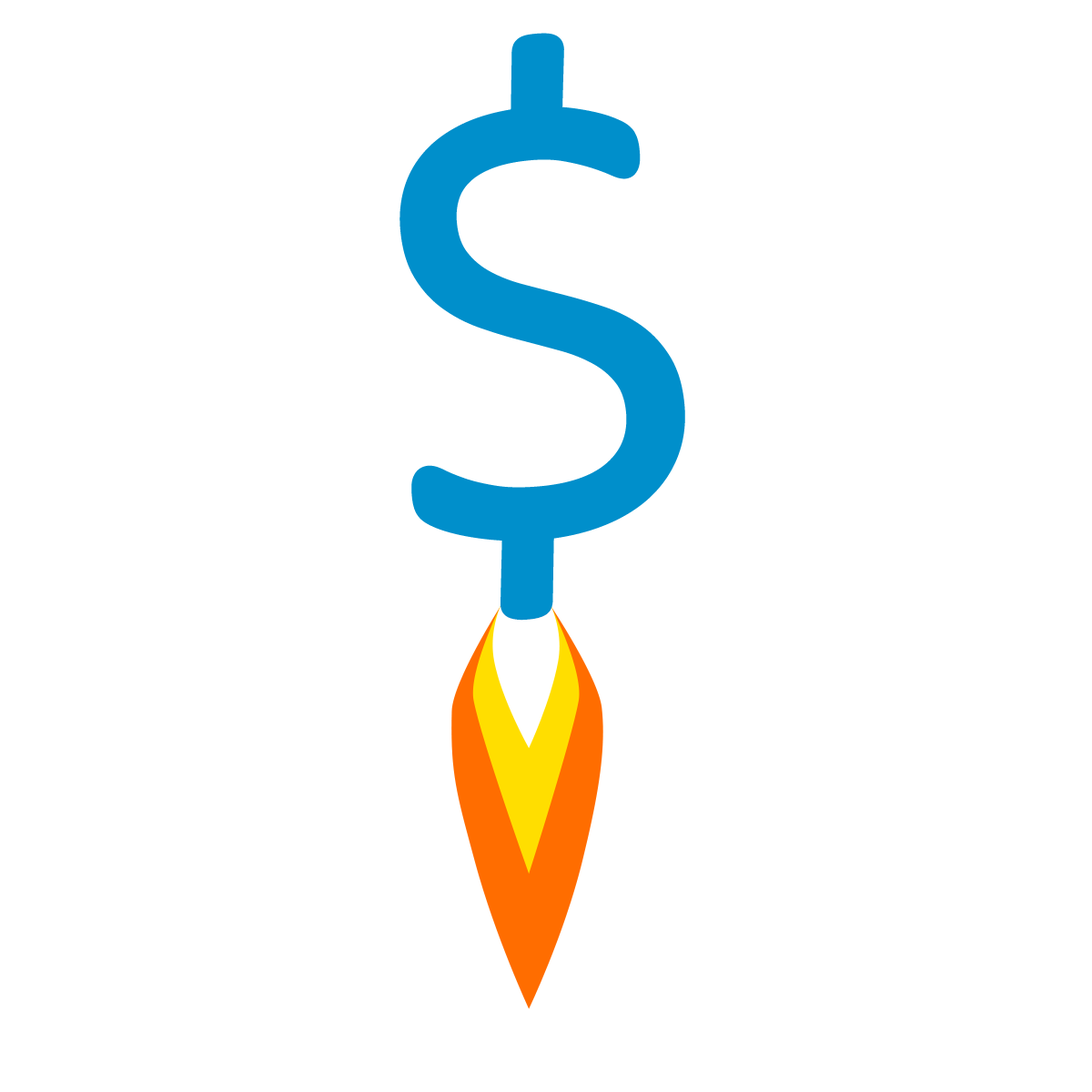
<style>
.page{position:relative;width:1092px;height:1092px;background:#ffffff}
.page>*{position:absolute;margin:0}
.t1{font:655.3px "Calibri-Light";letter-spacing:-0.01em;color:#008fcb;font-weight:bold}
</style>
<div class="page">
<p class="t1" style="left:399px;top:33px;width:286px;height:588px;rotate:-5deg">$</p>
</div>
